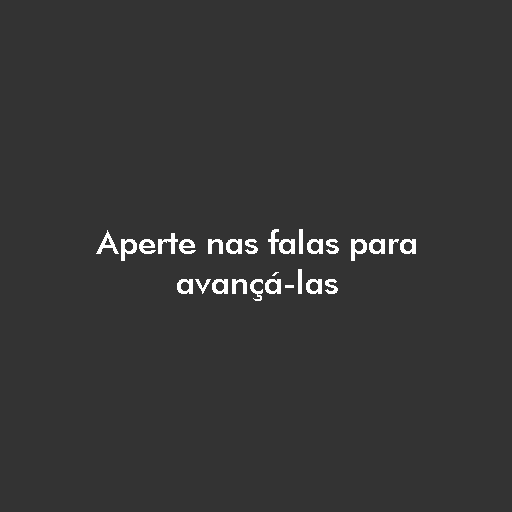
<style>
.page{position:relative;width:512px;height:512px;background:#333333}
.page>*{position:absolute;margin:0}
.t1{font:33.3px "FuturaBT-Medium";color:#ffffff}
</style>
<div class="page">
<p class="t1" style="left:96px;top:229px;width:320px;height:72px;text-align:center">Aperte nas falas para avançá-las</p>
</div>
